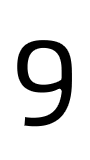
<style>
.page{position:relative;width:90px;height:160px;background:#ffffff}
.page>*{position:absolute;margin:0}
.t1{font:125px "GyeonggiTitleMOTF";color:#000000}
</style>
<div class="page">
<p class="t1" style="left:15px;top:38px;width:59px;height:91px">9</p>
</div>
